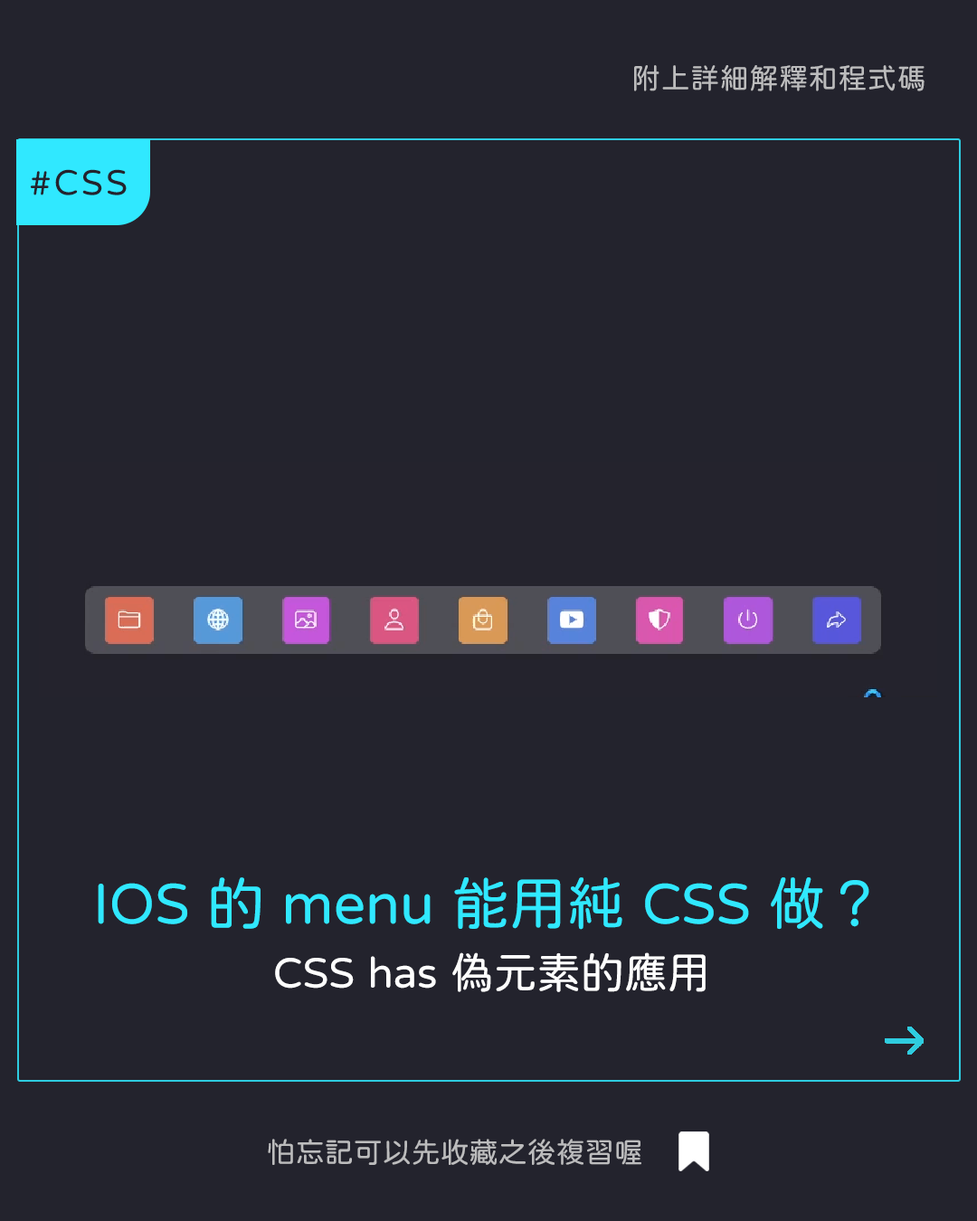
<style>
.page{position:relative;width:977px;height:1221px;background:#23232d}
.page>*{position:absolute;margin:0}
.t1{font:28.9px "jf-openhuninn-1.1";letter-spacing:0.02em;color:#bcbcbd}
.t2{font:36.2px "jf-openhuninn-1.1";letter-spacing:0.08em;color:#24232d}
.t3{font:57.9px "jf-openhuninn-1.1";color:#30e8ff}
.t4{font:43.4px "jf-openhuninn-1.1";color:#fefefe}
.t5{font:28.9px "jf-openhuninn-1.1";color:#bcbcbd}
</style>
<div class="page">
<p class="t1" style="left:634px;top:65px;width:290px;height:26px">附上詳細解釋和程式碼</p>
<p class="t2" style="left:30px;top:169px;width:97px;height:26px">#CSS</p>
<p class="t3" style="left:98px;top:877px;width:771px;height:53px">IOS 的 menu 能用純 CSS 做？</p>
<p class="t4" style="left:275px;top:952px;width:430px;height:40px">CSS has 偽元素的應用</p>
<p class="t5" style="left:268px;top:1139px;width:373px;height:26px">怕忘記可以先收藏之後複習喔</p>
</div>
